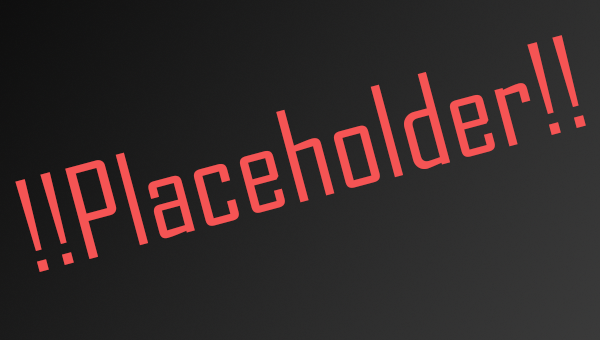
<style>
.page{position:relative;width:600px;height:340px}
.page>*{position:absolute;margin:0}
.t1{font:122.1px "AgencyFB-Reg";color:#f55454;scale:1.05 1}
</style>
<div class="page">
<p class="t1" style="left:15px;top:35px;width:571px;height:237px;rotate:-15deg">!!Placeholder!!</p>
</div>
